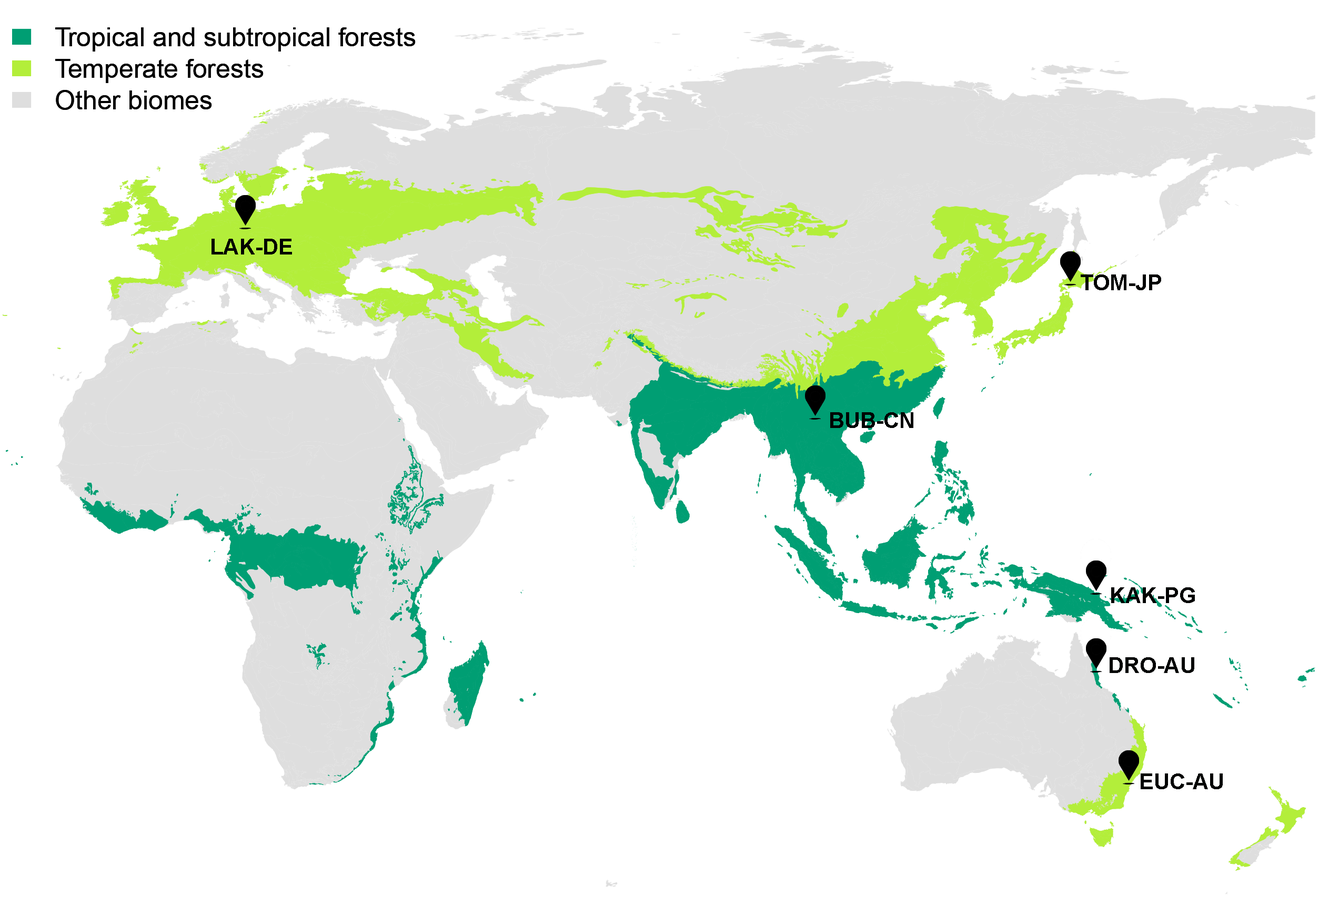
<style>
.page{position:relative;width:1329px;height:897px;background:#ffffff}
.page>*{position:absolute;margin:0}
.t1{font:21.9px "Arial-BoldMT";color:#000201}
</style>
<div class="page">
<p class="t1" style="left:211px;top:239px;width:81px;height:16px">LAK-DE</p>
<p class="t1" style="left:1080px;top:275px;width:81px;height:15px">TOM-JP</p>
<p class="t1" style="left:830px;top:412px;width:83px;height:16px">BUB-CN</p>
<p class="t1" style="left:1111px;top:588px;width:84px;height:15px">KAK-PG</p>
<p class="t1" style="left:1109px;top:658px;width:85px;height:15px">DRO-AU</p>
<p class="t1" style="left:1140px;top:774px;width:82px;height:16px">EUC-AU</p>
</div>
